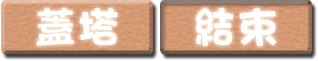
<style>
.page{position:relative;width:318px;height:61px}
.page>*{position:absolute;margin:0}
.t1{font:41.7px "DFHaiBao-W9-WINP-BF";letter-spacing:0.05em;color:#ffffff}
</style>
<div class="page">
<p class="t1" style="left:36px;top:7px;width:82px;height:39px">蓋塔</p>
<p class="t1" style="left:196px;top:8px;width:81px;height:38px">結束</p>
</div>
